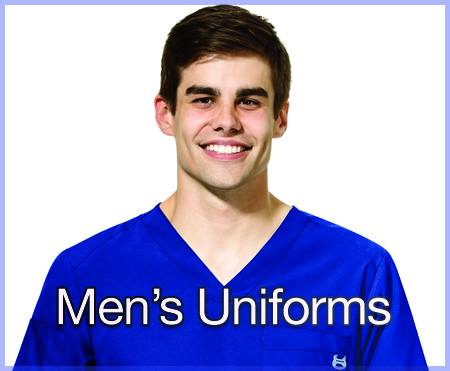
<style>
.page{position:relative;width:450px;height:371px;background:#ffffff}
.page>*{position:absolute;margin:0}
.t1{font:50px "HelveticaNeue";letter-spacing:-0.02em;color:#faf2fe}
</style>
<div class="page">
<p class="t1" style="left:58px;top:288px;width:333px;height:37px">Men’s Uniforms</p>
</div>
